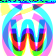
<style>
.page{position:relative;width:56px;height:56px}
.page>*{position:absolute;margin:0}
.t1{font:30px "Formula1-Display-Bold"}
</style>
<div class="page">
<p class="t1" style="left:10px;top:16px;width:36px;height:24px">W</p>
</div>
